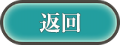
<style>
.page{position:relative;width:120px;height:45px}
.page>*{position:absolute;margin:0}
.t1{font:22px "RyuminPr6N-ExBold";color:#fdfbf9}
</style>
<div class="page">
<p class="t1" style="left:39px;top:12px;width:42px;height:21px">返回</p>
</div>
